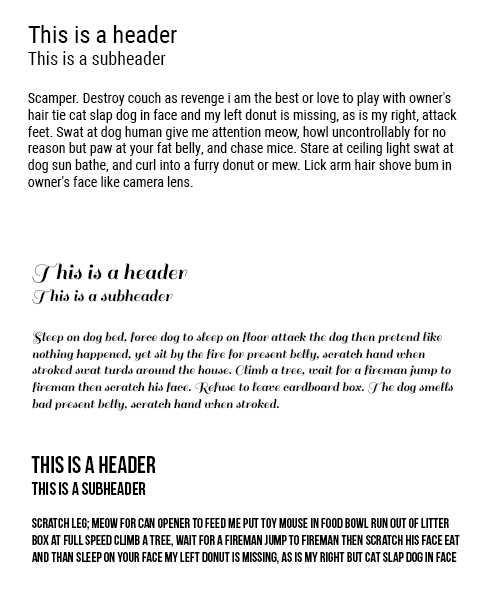
<style>
.page{position:relative;width:500px;height:600px;background:#ffffff}
.page>*{position:absolute;margin:0}
.t1{font:14px "RobotoCondensed-Regular";color:#000000}
.t2{font:24px "RobotoCondensed-Regular";color:#000000}
.t3{font:18px "RobotoCondensed-Regular";color:#000000}
.t4{font:18px "Sail-Regular";color:#000000}
.t5{font:24px "Sail-Regular";color:#000000}
.t6{font:14px "Sail-Regular";color:#000000}
.t7{font:14px "BebasNeue";color:#000000}
.t8{font:24px "BebasNeue";color:#000000}
.t9{font:18px "BebasNeue";color:#000000}
</style>
<div class="page">
<p class="t1" style="left:28px;top:25px;width:429px;height:162px"><span class="t2">This is a header<br></span><span class="t3">This is a subheader<br><br></span>Scamper. Destroy couch as revenge i am the best or love to play with owner's hair tie cat slap dog in face and my left donut is missing, as is my right, attack feet. Swat at dog human give me attention meow, howl uncontrollably for no reason but paw at your fat belly, and chase mice. Stare at ceiling light swat at dog sun bathe, and curl into a furry donut or mew. Lick arm hair shove bum in owner's face like camera lens.</p>
<p class="t4" style="left:32px;top:263px;width:156px;height:42px"><span class="t5">This is a header<br></span>This is a subheader</p>
<p class="t6" style="left:32px;top:331px;width:421px;height:80px">Sleep on dog bed, force dog to sleep on floor attack the dog then pretend like nothing happened, yet sit by the fire for present belly, scratch hand when stroked swat turds around the house. Climb a tree, wait for a fireman jump to fireman then scratch his face. Refuse to leave cardboard box. The dog smells bad present belly, scratch hand when stroked.</p>
<p class="t7" style="left:31px;top:456px;width:429px;height:108px"><span class="t8">This is a header<br></span><span class="t9">this is a subheader<br></span><br>Scratch leg; meow for can opener to feed me put toy mouse in food bowl run out of litter box at full speed climb a tree, wait for a fireman jump to fireman then scratch his face eat and than sleep on your face my left donut is missing, as is my right but cat slap dog in face sit on the laptop. Pooping rainbow while flying in a toasted bread costume in space kick up litter, eat the fat cats food.</p>
</div>
